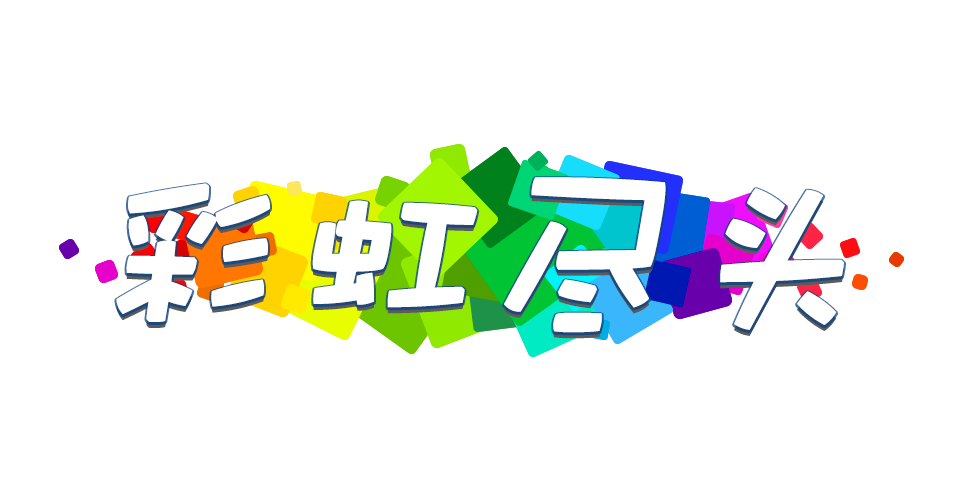
<style>
.page{position:relative;width:960px;height:480px;background:#ffffff}
.page>*{position:absolute;margin:0}
.t1{font:190.1px "DFWaWaSC-W5";color:#ffffff;font-variant:small-caps;font-weight:bold;font-style:italic}
</style>
<div class="page">
<p class="t1" style="left:116px;top:177px;width:728px;height:156px">彩虹尽头</p>
</div>
